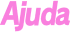
<style>
.page{position:relative;width:70px;height:32px;background:#ffffff}
.page>*{position:absolute;margin:0}
.t1{font:30.7px "RodinPro-EB";letter-spacing:-0.067em;color:#f980de;font-style:italic;scale:0.83 1}
</style>
<div class="page">
<p class="t1" style="left:0px;top:0px;width:71px;height:32px">Ajuda</p>
</div>
